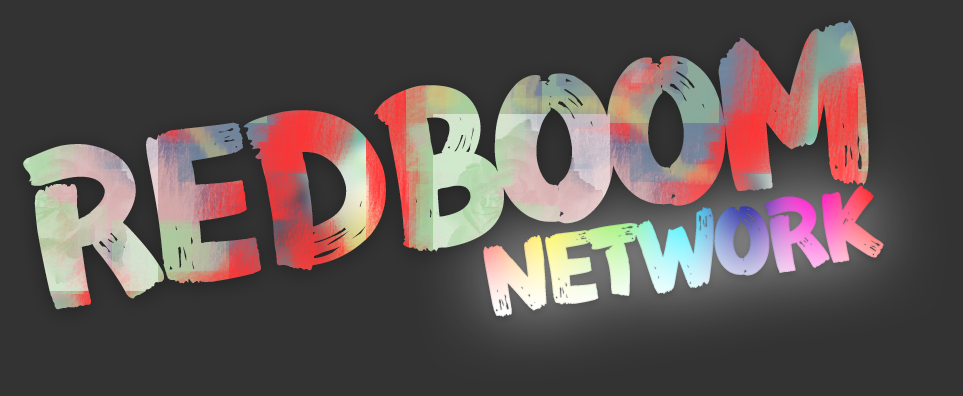
<style>
.page{position:relative;width:963px;height:396px;background:#333333}
.page>*{position:absolute;margin:0}
.t1{font:194px "FZFENSTXJW--GB1-0";letter-spacing:-0.08em}
.t2{font:90px "FZFENSTXJW--GB1-0";letter-spacing:-0.08em}
</style>
<div class="page">
<p class="t1" style="left:23px;top:20px;width:846px;height:290px;rotate:-9deg">REDBOOM</p>
<p class="t2" style="left:483px;top:185px;width:401px;height:132px;rotate:-9deg">NETWORK</p>
</div>
